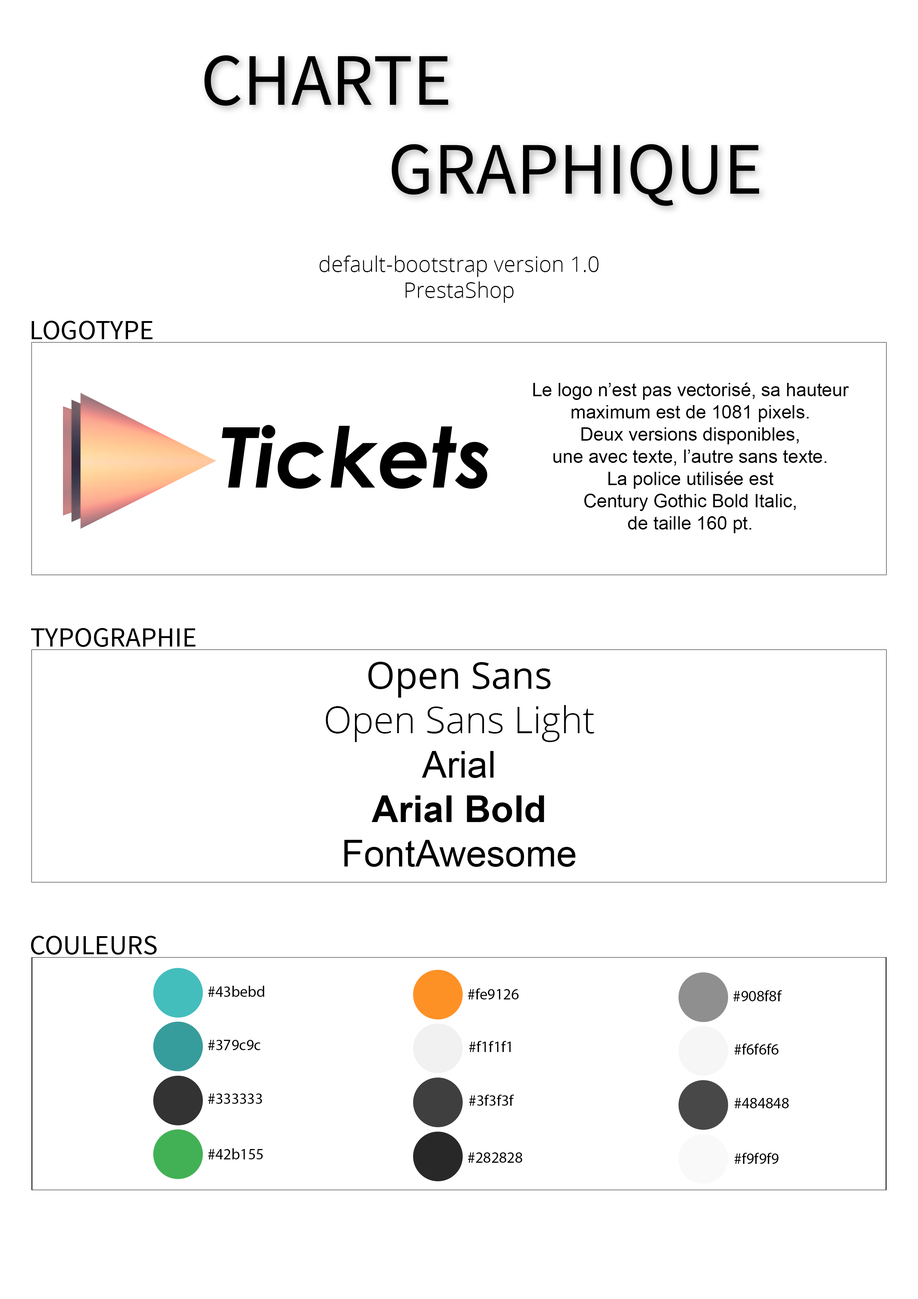
<style>
.page{position:relative;width:918px;height:1299px;background:#ffffff}
.page>*{position:absolute;margin:0}
.t1{font:74px "SourceSansPro-Regular";color:#000000}
.t2{font:21.6px "OpenSans-Light";color:#000000}
.t3{font:27.8px "SourceSansPro-Regular";color:#000000}
.t4{font:18.5px "ArialMT";color:#000000}
.t5{font:37px "OpenSans-Light";color:#000000}
.t6{font:37px "OpenSans";color:#000000}
.t7{font:37px "ArialMT";color:#000000}
.t8{font:37px "Arial-BoldMT";color:#000000}
.t9{font:15.4px "MyriadPro-Regular";color:#000000}
</style>
<div class="page">
<p class="t1" style="left:204px;top:55px;width:555px;height:151px">CHARTE<br>GRAPHIQUE</p>
<p class="t2" style="left:320px;top:255px;width:279px;height:48px;text-align:center">default-bootstrap version 1.0<br>PrestaShop</p>
<p class="t3" style="left:31px;top:321px;width:122px;height:18px">LOGOTYPE</p>
<p class="t4" style="left:533px;top:382px;width:316px;height:151px;text-align:center">Le logo n’est pas vectorisé, sa hauteur maximum est de 1081 pixels.<br>Deux versions disponibles,<br>une avec texte, l’autre sans texte.<br>La police utilisée est<br>Century Gothic Bold Italic,<br>de taille 160 pt.</p>
<p class="t3" style="left:31px;top:628px;width:164px;height:19px">TYPOGRAPHIE</p>
<p class="t5" style="left:326px;top:662px;width:268px;height:205px;text-align:center"><span class="t6">Open Sans<br></span>Open Sans Light<br><span class="t7">Arial<br></span><span class="t8">Arial Bold<br></span><span class="t7">FontAwesome</span></p>
<p class="t3" style="left:31px;top:936px;width:126px;height:18px">COULEURS</p>
<p class="t9" style="left:208px;top:986px;width:56px;height:11px">#43bebd</p>
<p class="t9" style="left:468px;top:988px;width:51px;height:11px">#fe9126</p>
<p class="t9" style="left:733px;top:990px;width:49px;height:11px">#908f8f</p>
<p class="t9" style="left:208px;top:1040px;width:53px;height:10px">#379c9c</p>
<p class="t9" style="left:469px;top:1041px;width:42px;height:11px">#f1f1f1</p>
<p class="t9" style="left:735px;top:1043px;width:44px;height:11px">#f6f6f6</p>
<p class="t9" style="left:208px;top:1093px;width:54px;height:11px">#333333</p>
<p class="t9" style="left:469px;top:1094px;width:45px;height:11px">#3f3f3f</p>
<p class="t9" style="left:735px;top:1098px;width:54px;height:10px">#484848</p>
<p class="t9" style="left:208px;top:1148px;width:55px;height:11px">#42b155</p>
<p class="t9" style="left:468px;top:1152px;width:54px;height:10px">#282828</p>
<p class="t9" style="left:735px;top:1152px;width:44px;height:12px">#f9f9f9</p>
</div>
